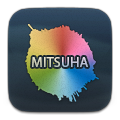
<style>
.page{position:relative;width:120px;height:120px;background:#ffffff}
.page>*{position:absolute;margin:0}
.t1{font:14px "MyriadPro-Regular";letter-spacing:0.02em;text-transform:uppercase}
</style>
<div class="page">
<p class="t1" style="left:32px;top:57px;width:56px;height:10px">MITSUHA</p>
</div>
